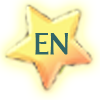
<style>
.page{position:relative;width:100px;height:100px}
.page>*{position:absolute;margin:0}
.t1{font:31px "LinuxBiolinumG";letter-spacing:-0.075em;color:#336666;font-weight:bold}
</style>
<div class="page">
<p class="t1" style="left:35px;top:33px;width:33px;height:22px">EN</p>
</div>
